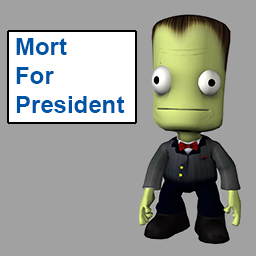
<style>
.page{position:relative;width:256px;height:256px;background:#a1a1a1}
.page>*{position:absolute;margin:0}
.t1{font:24px "Arial-BoldMT";color:#0054a6}
</style>
<div class="page">
<p class="t1" style="left:16px;top:38px;width:109px;height:75px">Mort<br>For<br>President</p>
</div>
